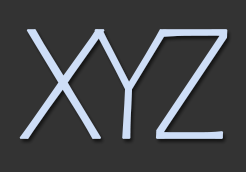
<style>
.page{position:relative;width:246px;height:172px;background:#333333}
.page>*{position:absolute;margin:0}
.t1{font:161.7px "ErasITC-Light";letter-spacing:-0.1em;color:#cedef7;font-weight:bold;scale:0.9 1}
</style>
<div class="page">
<p class="t1" style="left:19px;top:29px;width:209px;height:110px">XYZ</p>
</div>
